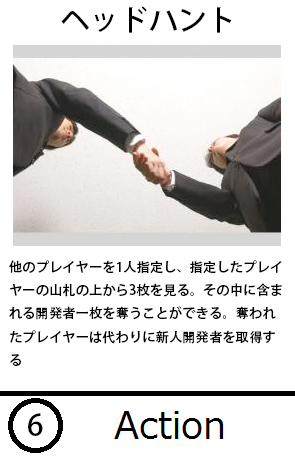
<style>
.page{position:relative;width:295px;height:460px;background:#ffffff}
.page>*{position:absolute;margin:0}
.t1{font:29.3px "AdobeHeitiStd-Regular";color:#000000}
.t2{font:13.3px "AdobeHeitiStd-Regular";color:#000000}
</style>
<div class="page">
<p class="t1" style="left:61px;top:6px;width:171px;height:27px">ヘッドハント</p>
<p class="t2" style="left:9px;top:260px;width:273px;height:106px">他のプレイヤーを1人指定し、指定したプレイヤーの山札の上から3枚を見る。その中に含まれる開発者一枚を奪うことができる。奪われたプレイヤーは代わりに新人開発者を取得する</p>
<p class="t1" style="left:28px;top:413px;width:15px;height:23px">6</p>
</div>
